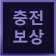
<style>
.page{position:relative;width:56px;height:56px;background:#110b23}
.page>*{position:absolute;margin:0}
.t1{font:16px "MalgunGothicBold";color:#8c83ca}
</style>
<div class="page">
<p class="t1" style="left:13px;top:10px;width:31px;height:35px">충전<br>보상</p>
</div>
